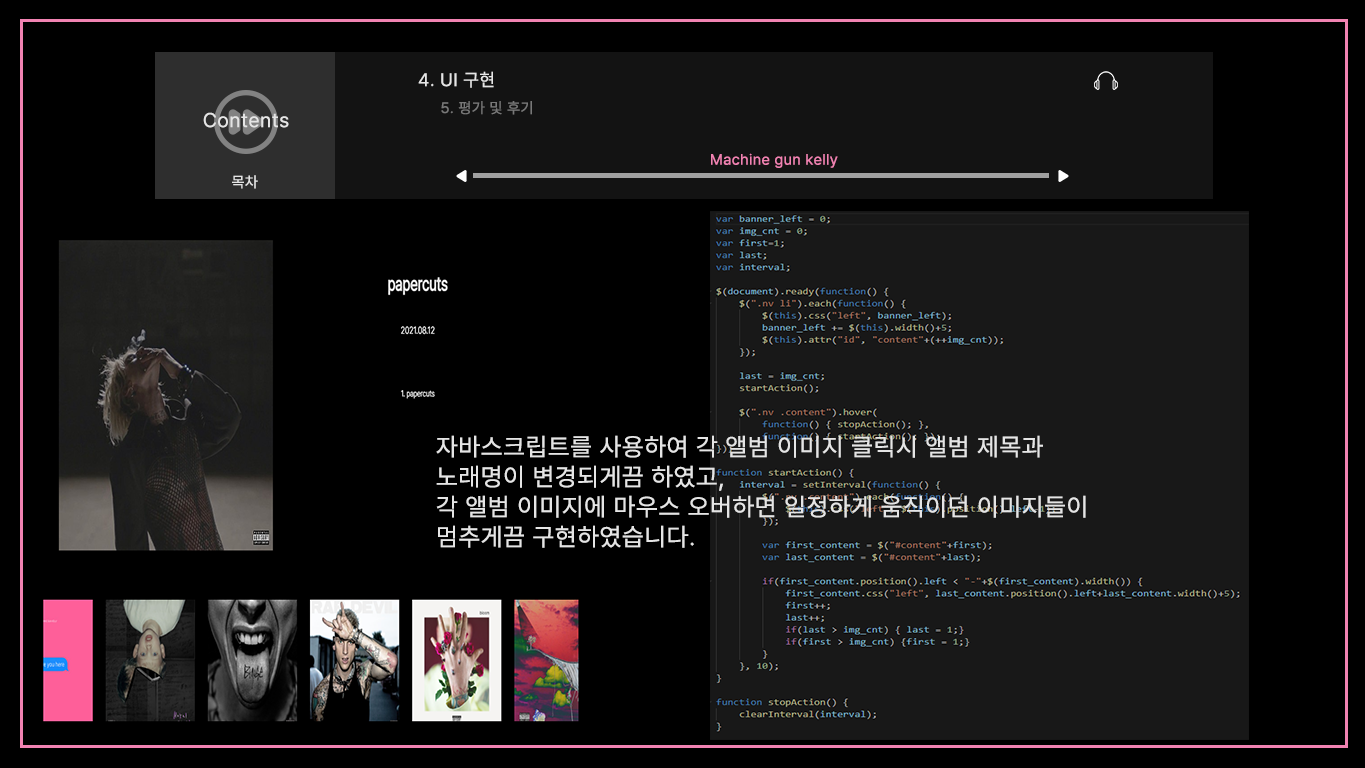
<style>
.page{position:relative;width:1365px;height:768px;background:#000000}
.page>*{position:absolute;margin:0}
.t1{font:18px "Pretendard-Regular";letter-spacing:0.03em;color:#e5e5e5}
.t2{font:15px "Pretendard-Regular";letter-spacing:0.03em;color:#787878}
.t3{font:20px "Pretendard-Regular";letter-spacing:0.03em;color:#e5e5e5}
.t4{font:15px "Pretendard-Regular";letter-spacing:0.03em;color:#f183b2}
.t5{font:15px "Pretendard-Regular";letter-spacing:0.03em;color:#e5e5e5}
.t6{font:25px/30px "Pretendard-Regular";letter-spacing:0.03em;color:#e5e5e5}
</style>
<div class="page">
<p class="t1" style="left:418px;top:71px;width:76px;height:17px">4. UI 구현</p>
<p class="t2" style="left:441px;top:101px;width:91px;height:14px">5. 평가 및 후기</p>
<p class="t3" style="left:203px;top:112px;width:86px;height:16px">Contents</p>
<p class="t4" style="left:711px;top:153px;width:127px;height:15px">Machine gun kelly</p>
<p class="t5" style="left:232px;top:175px;width:26px;height:14px">목차</p>
<p class="t6" style="left:436px;top:435px;width:650px;height:113px">자바스크립트를 사용하여 각 앨범 이미지 클릭시 앨범 제목과 <br>노래명이 변경되게끔 하였고,<br>각 앨범 이미지에 마우스 오버하면 일정하게 움직이던 이미지들이<br>멈추게끔 구현하였습니다.</p>
</div>
